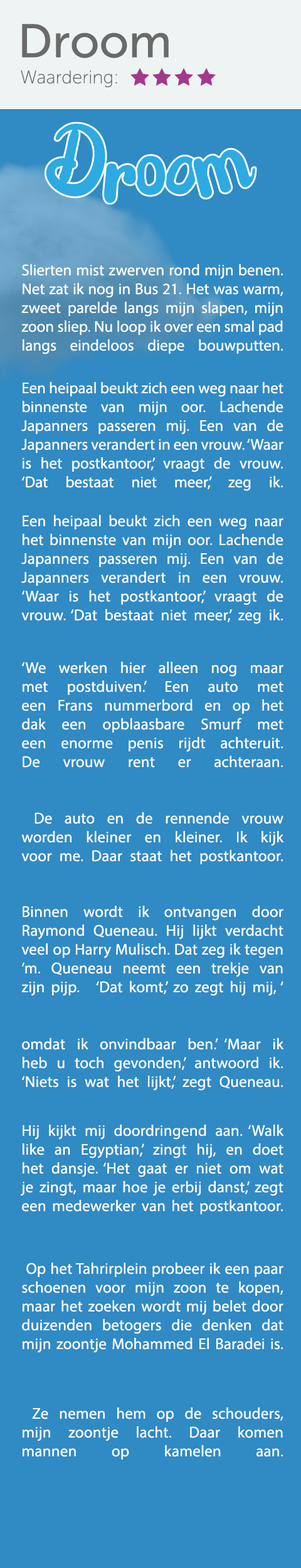
<style>
.page{position:relative;width:301px;height:1568px;background:#308ac4}
.page>*{position:absolute;margin:0}
.t1{font:47px "MuseoSans-500";color:#6a6a6a}
.t2{font:18.3px "MuseoSans-100";color:#6a6a6a}
.t3{font:15.7px "MyriadPro-Regular";color:#ffffff}
</style>
<div class="page">
<p class="t1" style="left:22px;top:24px;width:147px;height:34px">Droom</p>
<p class="t2" style="left:21px;top:70px;width:96px;height:17px">Waardering:</p>
<p class="t3" style="left:21px;top:264px;width:262px;height:90px;text-align:justify">Slierten mist zwerven rond mijn benen. Net zat ik nog in Bus 21. Het was warm, zweet parelde langs mijn slapen, mijn zoon sliep. Nu loop ik over een smal pad langs eindeloos diepe bouwputten.</p>
<p class="t3" style="left:21px;top:382px;width:262px;height:109px;text-align:justify">Een heipaal beukt zich een weg naar het binnenste van mijn oor. Lachende Japanners passeren mij. Een van de Japanners verandert in een vrouw. ‘Waar is het postkantoor,’ vraagt de vrouw. <br>‘Dat bestaat niet meer,’ zeg ik.</p>
<p class="t3" style="left:21px;top:515px;width:262px;height:109px;text-align:justify">Een heipaal beukt zich een weg naar het binnenste van mijn oor. Lachende Japanners passeren mij. Een van de Japanners verandert in een vrouw. ‘Waar is het postkantoor,’ vraagt de vrouw. ‘Dat bestaat niet meer,’ zeg ik.</p>
<p class="t3" style="left:22px;top:662px;width:261px;height:106px;text-align:justify">‘We werken hier alleen nog maar met postduiven.’ Een auto met een Frans nummerbord en op het dak een opblaasbare Smurf met een enorme penis rijdt achteruit. De vrouw rent er achteraan.</p>
<p class="t3" style="left:21px;top:812px;width:263px;height:52px;text-align:justify">De auto en de rennende vrouw worden kleiner en kleiner. Ik kijk voor me. Daar staat het postkantoor.</p>
<p class="t3" style="left:21px;top:906px;width:262px;height:90px;text-align:justify">Binnen wordt ik ontvangen door Raymond Queneau. Hij lijkt verdacht veel op Harry Mulisch. Dat zeg ik tegen ’m. Queneau neemt een trekje van zijn pijp.   ‘Dat komt,’ zo zegt hij mij, ‘</p>
<p class="t3" style="left:22px;top:1038px;width:262px;height:53px;text-align:justify">omdat ik onvindbaar ben.’ ‘Maar ik heb u toch gevonden,’ antwoord ik. ‘Niets is wat het lijkt,’ zegt Queneau.</p>
<p class="t3" style="left:21px;top:1125px;width:263px;height:89px;text-align:justify">Hij kijkt mij doordringend aan. ‘Walk like an Egyptian,’ zingt hij, en doet het dansje. ‘Het gaat er niet om wat je zingt, maar hoe je erbij danst,’ zegt een medewerker van het postkantoor.</p>
<p class="t3" style="left:22px;top:1263px;width:261px;height:90px;text-align:justify">Op het Tahrirplein probeer ik een paar schoenen voor mijn zoon te kopen, maar het zoeken wordt mij belet door duizenden betogers die denken dat mijn zoontje Mohammed El Baradei is.</p>
<p class="t3" style="left:23px;top:1407px;width:260px;height:52px;text-align:justify">Ze nemen hem op de schouders, mijn zoontje lacht. Daar komen mannen op kamelen aan.</p>
</div>
